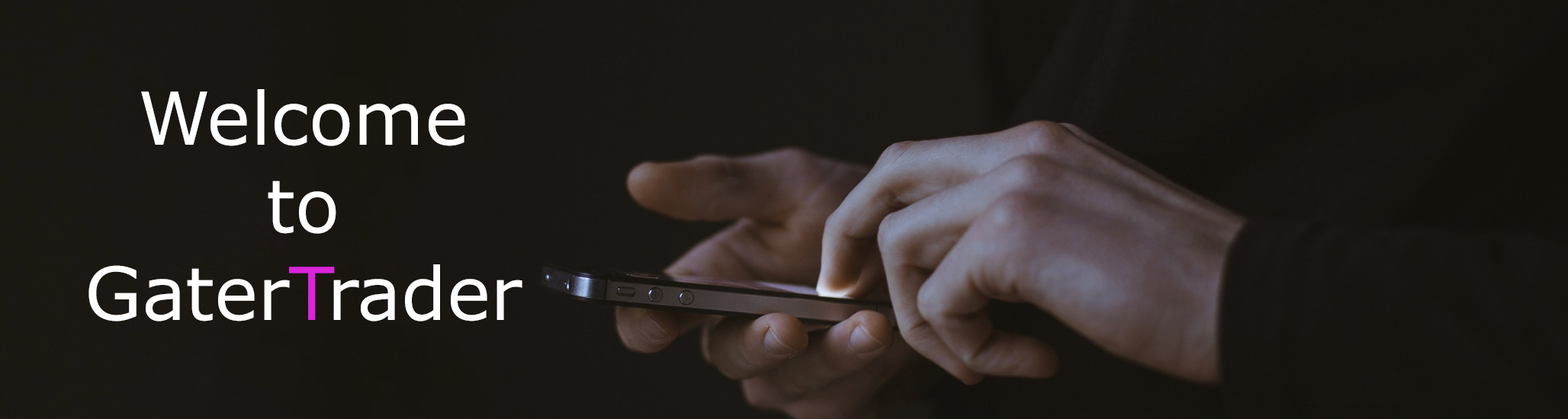
<style>
.page{position:relative;width:1568px;height:419px}
.page>*{position:absolute;margin:0}
.t1{font:73.2px "Verdana";color:#ffffff}
.t2{font:73.2px "Verdana";color:#da24da}
</style>
<div class="page">
<p class="t1" style="left:88px;top:89px;width:434px;height:233px;text-align:center">Welcome <br>to<br>Gater<span class="t2">T</span>rader</p>
</div>
